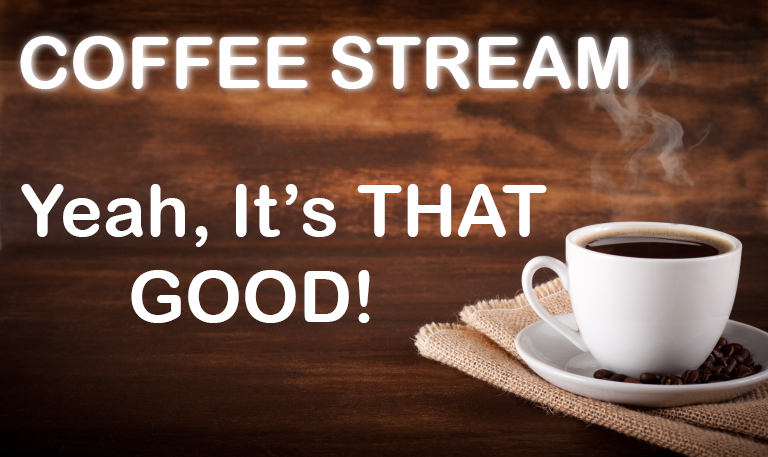
<style>
.page{position:relative;width:768px;height:457px}
.page>*{position:absolute;margin:0}
.t1{font:72px "ArialRoundedMTBold";color:#ffffff}
</style>
<div class="page">
<p class="t1" style="left:20px;top:36px;width:608px;height:53px">COFFEE STREAM</p>
<p class="t1" style="left:21px;top:184px;width:526px;height:139px">Yeah, It’s THAT<br>      GOOD!</p>
</div>
